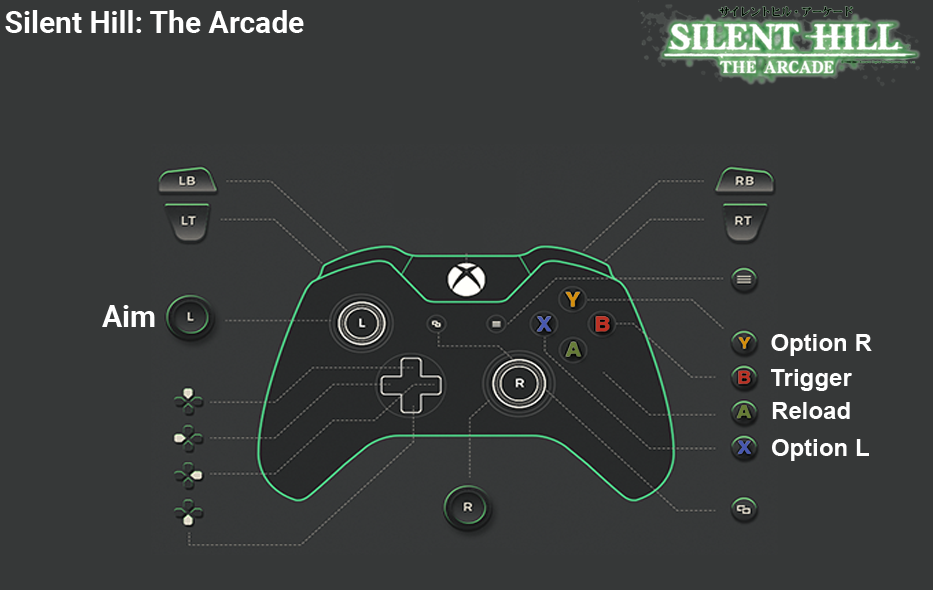
<style>
.page{position:relative;width:933px;height:590px;background:#363838}
.page>*{position:absolute;margin:0}
.t1{font:30px "Roboto-Bold";color:#ffffff}
.t2{font:30px "Roboto-Bold";color:#fefefe}
.t3{font:24px "Arial-BoldMT";color:#fefefe}
</style>
<div class="page">
<p class="t1" style="left:5px;top:10px;width:299px;height:23px">Silent Hill: The Arcade</p>
<p class="t2" style="left:102px;top:305px;width:53px;height:22px">Aim</p>
<p class="t3" style="left:771px;top:334px;width:101px;height:22px">Option R</p>
<p class="t3" style="left:771px;top:369px;width:81px;height:22px">Trigger</p>
<p class="t3" style="left:772px;top:402px;width:78px;height:17px">Reload</p>
<p class="t3" style="left:772px;top:439px;width:97px;height:22px">Option L</p>
</div>
